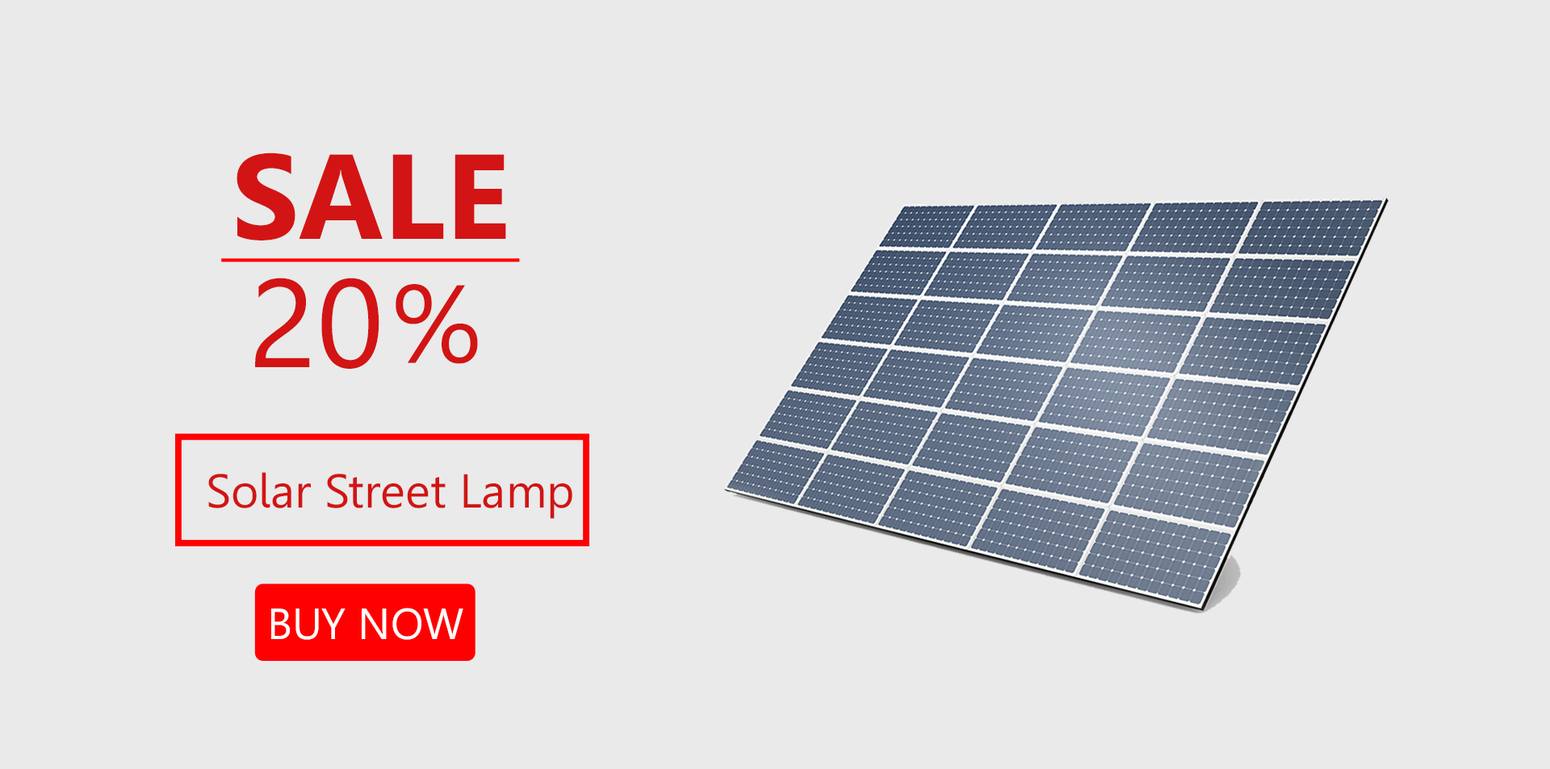
<style>
.page{position:relative;width:1550px;height:769px;background:#eaeaea}
.page>*{position:absolute;margin:0}
.t1{font:120.2px "Leelawadee-Bold";color:#d21414}
.t2{font:124.9px "Leelawadee";color:#d21414}
.t3{font:109.9px "Leelawadee";color:#d21414}
.t4{font:47.4px "Leelawadee";color:#d21414}
.t5{font:43.5px "Leelawadee";color:#ffffff}
</style>
<div class="page">
<p class="t1" style="left:237px;top:153px;width:269px;height:88px">SALE</p>
<p class="t2" style="left:255px;top:278px;width:124px;height:91px">20</p>
<p class="t3" style="left:396px;top:284px;width:82px;height:80px">%</p>
<p class="t4" style="left:208px;top:472px;width:364px;height:47px">Solar Street Lamp</p>
<p class="t5" style="left:271px;top:608px;width:192px;height:32px">BUY NOW</p>
</div>
